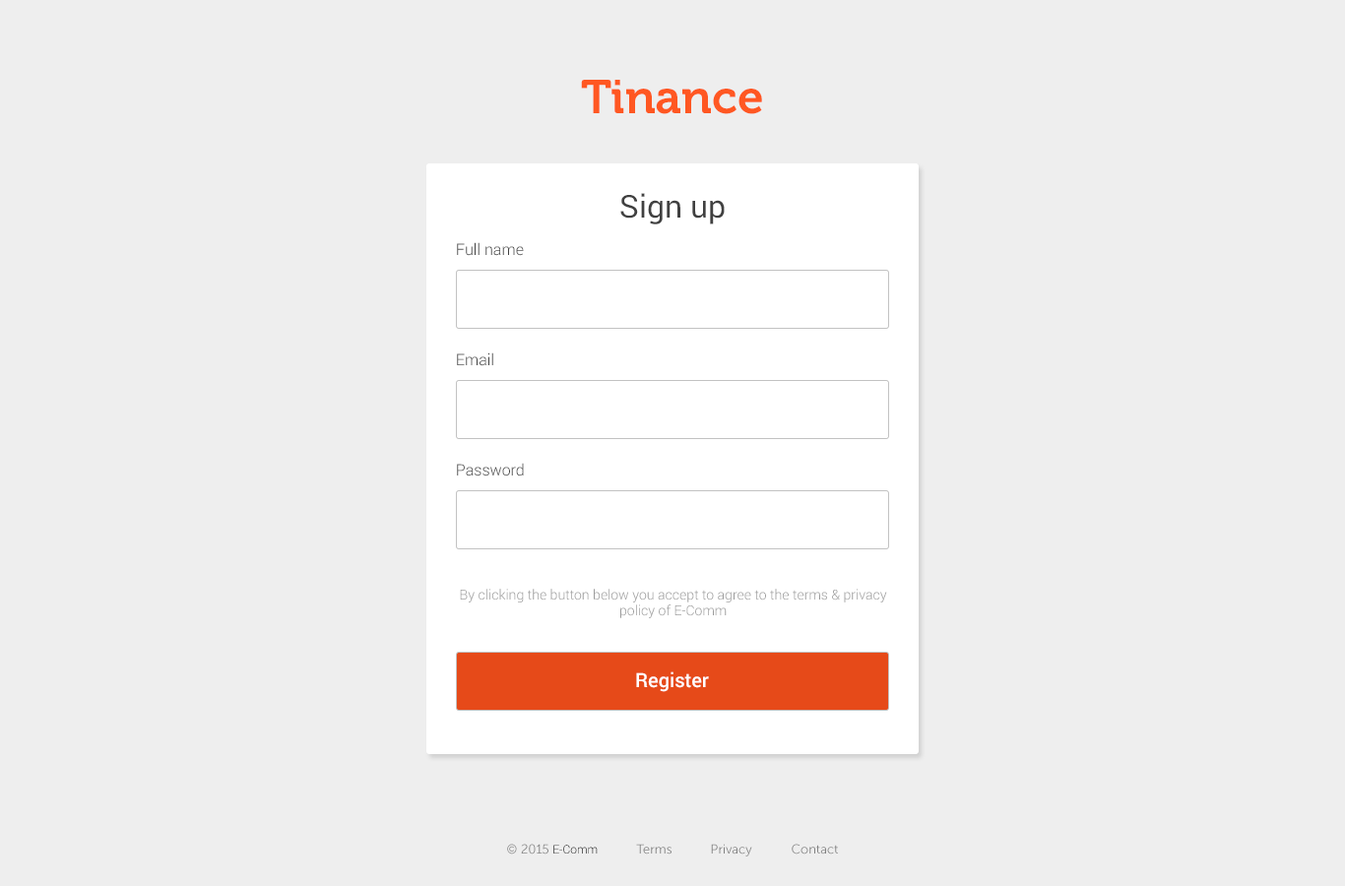
<style>
.page{position:relative;width:1345px;height:886px;background:#eeeeee}
.page>*{position:absolute;margin:0}
.t1{font:47.3px "Museo700-Regular";color:#ff5722}
.t2{font:31.5px "Roboto-Regular";color:#404040}
.t3{font:15.8px "Roboto-Light";color:#404040}
.t4{font:13.8px "Roboto-Light";color:#9a9a9a}
.t5{font:19.7px "Roboto-Medium";color:#ffffff}
.t6{font:12.8px "MuseoSans-300";color:#828282}
.t7{font:11.8px "Roboto-Light";color:#000000}
</style>
<div class="page">
<p class="t1" style="left:581px;top:80px;width:181px;height:34px">Tinance</p>
<p class="t2" style="left:620px;top:193px;width:105px;height:32px">Sign up</p>
<p class="t3" style="left:457px;top:242px;width:67px;height:14px">Full name</p>
<p class="t3" style="left:457px;top:353px;width:36px;height:13px">Email</p>
<p class="t3" style="left:457px;top:463px;width:67px;height:14px">Password</p>
<p class="t4" style="left:460px;top:589px;width:427px;height:29px;text-align:center">By clicking the button below you accept to agree to the terms &amp; privacy policy of E-Comm</p>
<p class="t5" style="left:636px;top:672px;width:73px;height:20px">Register</p>
<p class="t6" style="left:507px;top:844px;width:91px;height:11px">© 2015 <span class="t7">E-Comm</span></p>
<p class="t6" style="left:636px;top:844px;width:36px;height:11px">Terms</p>
<p class="t6" style="left:711px;top:844px;width:41px;height:13px">Privacy</p>
<p class="t6" style="left:792px;top:844px;width:46px;height:11px">Contact</p>
</div>
